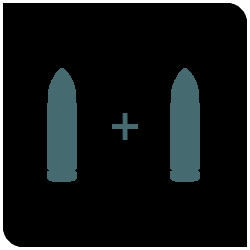
<style>
.page{position:relative;width:250px;height:250px;background:#000000}
.page>*{position:absolute;margin:0}
.t1{font:55px "ArialMT";color:#456b71}
</style>
<div class="page">
<p class="t1" style="left:112px;top:113px;width:26px;height:27px">+</p>
</div>
